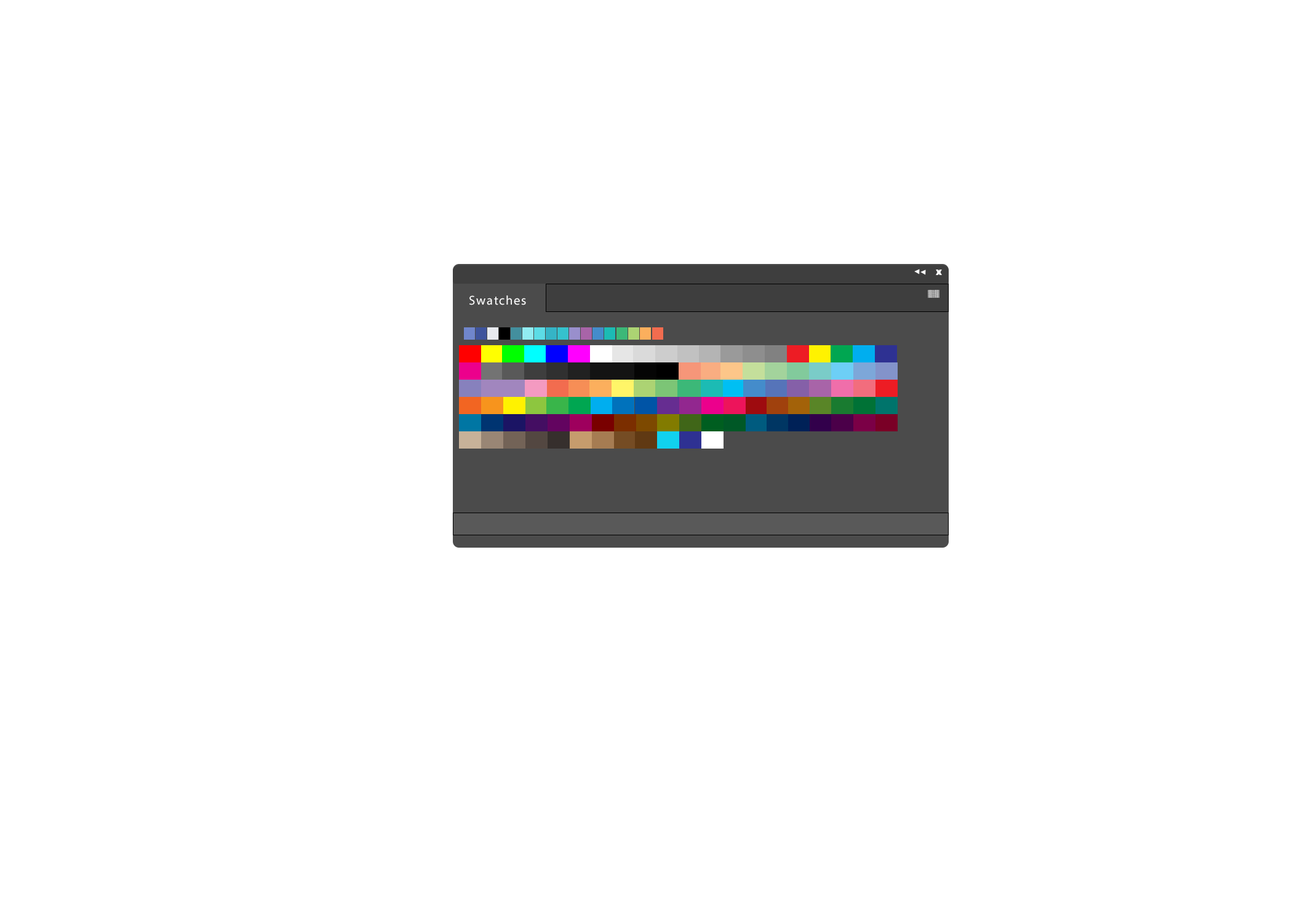
<style>
.page{position:relative;width:1292px;height:923px;background:#ffffff}
.page>*{position:absolute;margin:0}
.t1{font:12.8px "MyriadPro-Regular";letter-spacing:0.075em;color:#ffffff}
</style>
<div class="page">
<p class="t1" style="left:469px;top:295px;width:57px;height:10px">Swatches</p>
</div>
